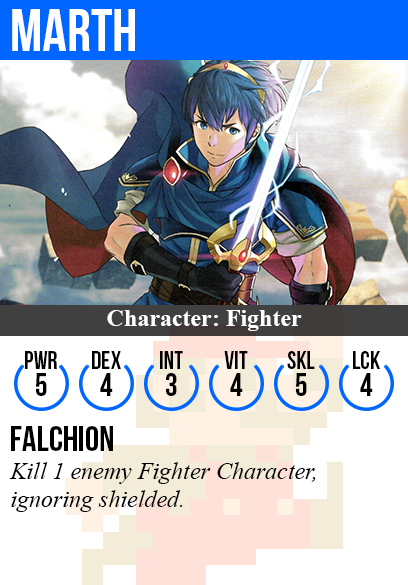
<style>
.page{position:relative;width:408px;height:585px;background:#ffffff}
.page>*{position:absolute;margin:0}
.t1{font:60px "BebasNeue";color:#ffffff}
.t2{font:24px "TimesNewRomanPS-BoldMT";color:#ffffff}
.t3{font:25px "BebasNeue";color:#000000}
.t4{font:32px "BebasNeue";color:#000000}
.t5{font:36px "BebasNeue";color:#000000}
.t6{font:24px "TimesNewRomanPS-ItalicMT";color:#000000}
</style>
<div class="page">
<p class="t1" style="left:12px;top:9px;width:123px;height:42px">marth</p>
<p class="t2" style="left:107px;top:310px;width:195px;height:21px">Character: Fighter</p>
<p class="t3" style="left:25px;top:351px;width:32px;height:18px">PWR</p>
<p class="t3" style="left:92px;top:351px;width:29px;height:18px">dex</p>
<p class="t3" style="left:160px;top:351px;width:23px;height:18px">int</p>
<p class="t3" style="left:224px;top:351px;width:24px;height:18px">vit</p>
<p class="t3" style="left:287px;top:351px;width:28px;height:18px">skl</p>
<p class="t3" style="left:353px;top:351px;width:27px;height:18px">lck</p>
<p class="t4" style="left:36px;top:373px;width:11px;height:23px">5</p>
<p class="t4" style="left:100px;top:373px;width:13px;height:23px">4</p>
<p class="t4" style="left:166px;top:373px;width:11px;height:23px">3</p>
<p class="t4" style="left:230px;top:373px;width:13px;height:23px">4</p>
<p class="t4" style="left:296px;top:373px;width:11px;height:23px">5</p>
<p class="t4" style="left:360px;top:373px;width:13px;height:23px">4</p>
<p class="t5" style="left:11px;top:426px;width:102px;height:25px">falchion</p>
<p class="t6" style="left:9px;top:462px;width:307px;height:50px">Kill 1 enemy Fighter Character,<br>ignoring shielded.</p>
</div>
